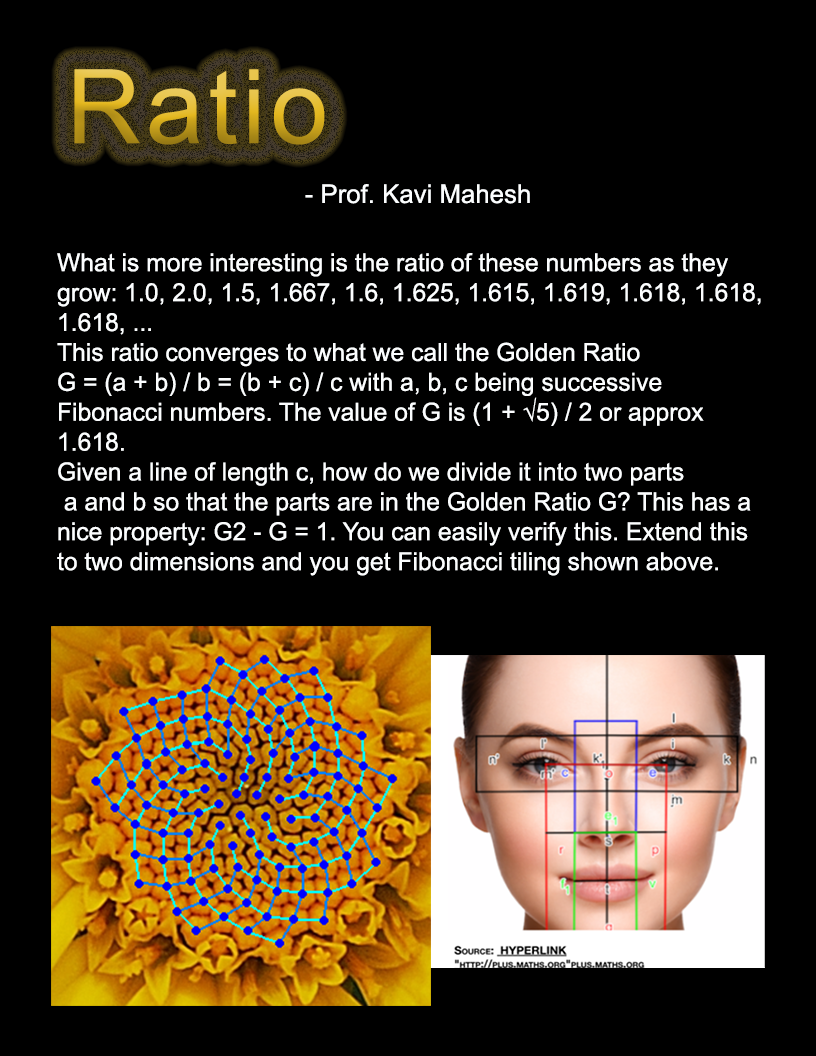
<style>
.page{position:relative;width:816px;height:1056px;background:#000000}
.page>*{position:absolute;margin:0}
.t1{font:103.2px "ArialMT";letter-spacing:0.05em}
.t2{font:25.8px "ArialMT";color:#fcfeff}
.t3{font:24.9px "ArialMT";color:#fcfeff}
</style>
<div class="page">
<p class="t1" style="left:74px;top:69px;width:251px;height:76px">Ratio</p>
<p class="t2" style="left:305px;top:184px;width:225px;height:20px">- Prof. Kavi Mahesh</p>
<p class="t3" style="left:57px;top:253px;width:704px;height:323px">What is more interesting is the ratio of these numbers as they <br>grow: 1.0, 2.0, 1.5, 1.667, 1.6, 1.625, 1.615, 1.619, 1.618, 1.618,<br>1.618, ...<br>This ratio converges to what we call the Golden Ratio <br>G = (a + b) / b = (b + c) / c with a, b, c being successive <br>Fibonacci numbers. The value of G is (1 + √5) / 2 or approx <br>1.618.  <br>Given a line of length c, how do we divide it into two parts<br> a and b so that the parts are in the Golden Ratio G? This has a <br>nice property: G2 - G = 1. You can easily verify this. Extend this <br>to two dimensions and you get Fibonacci tiling shown above.</p>
</div>
